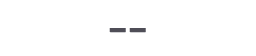
<style>
.page{position:relative;width:256px;height:56px;background:#ffffff}
.page>*{position:absolute;margin:0}
.t1{font:36px "HYWenHei-HEW";color:#4f4e57}
</style>
<div class="page">
<p class="t1" style="left:109px;top:28px;width:37px;height:5px">--</p>
</div>
